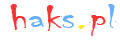
<style>
.page{position:relative;width:120px;height:40px;background:#ffffff}
.page>*{position:absolute;margin:0}
.t1{font:36px "Chiller-Regular";color:#fd3232;scale:1.5 1}
.t2{font:36px "Chiller-Regular";color:#67afff;scale:1.5 1}
.t3{font:36px "Chiller-Regular";color:#fde332;scale:1.5 1}
</style>
<div class="page">
<p class="t1" style="left:10px;top:4px;width:106px;height:32px">h<span class="t2">a</span>k<span class="t2">s</span><span class="t3">.</span>p<span class="t2">l</span></p>
</div>
